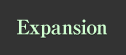
<style>
.page{position:relative;width:126px;height:55px;background:#333333}
.page>*{position:absolute;margin:0}
.t1{font:20px "RyuminPro-ExBold";letter-spacing:-0.04em;color:#d0ffd1}
</style>
<div class="page">
<p class="t1" style="left:17px;top:19px;width:90px;height:19px">Expansion</p>
</div>
